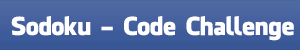
<style>
.page{position:relative;width:300px;height:50px}
.page>*{position:absolute;margin:0}
.t1{font:24.2px "FacebookLetterFaces";color:#ffffff}
</style>
<div class="page">
<p class="t1" style="left:11px;top:16px;width:283px;height:25px">Sodoku - Code Challenge</p>
</div>
